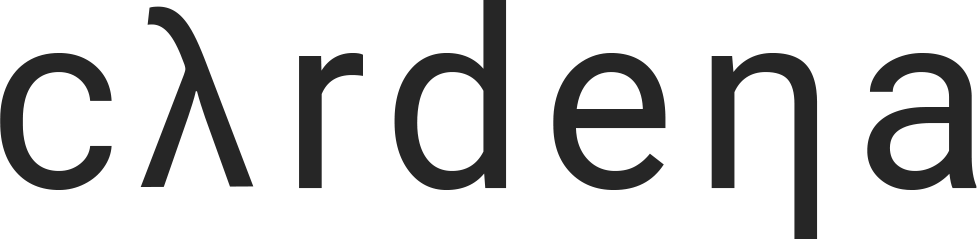
<style>
.page{position:relative;width:977px;height:239px;background:#ffffff}
.page>*{position:absolute;margin:0}
.t1{font:250px "Roboto-Regular";letter-spacing:0.075em;color:#262626}
.t2{font:250px "MyriadPro-Regular";color:#262626}
</style>
<div class="page">
<p class="t1" style="left:0px;top:0px;width:977px;height:239px">c  rdeηa</p>
<p class="t2" style="left:140px;top:6px;width:114px;height:181px">λ</p>
</div>
